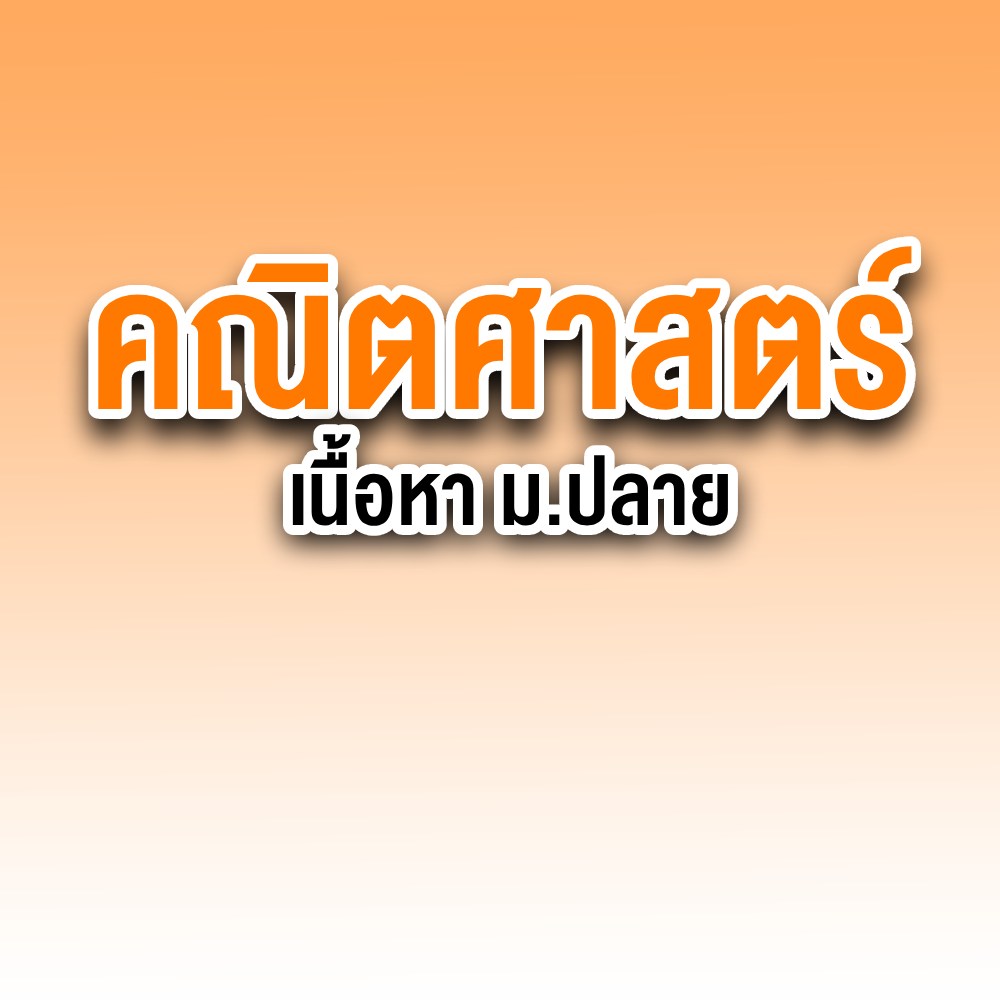
<style>
.page{position:relative;width:1000px;height:1000px}
.page>*{position:absolute;margin:0}
.t1{font:262px "DBHeavent-BoldCond";color:#ff7800}
.t2{font:118px "DBHeavent-BoldCond";color:#000000}
</style>
<div class="page">
<p class="t1" style="left:98px;top:246px;width:814px;height:165px">คณิตศาสตร์</p>
<p class="t2" style="left:292px;top:434px;width:436px;height:92px">เนื้อหา ม.ปลาย</p>
</div>
